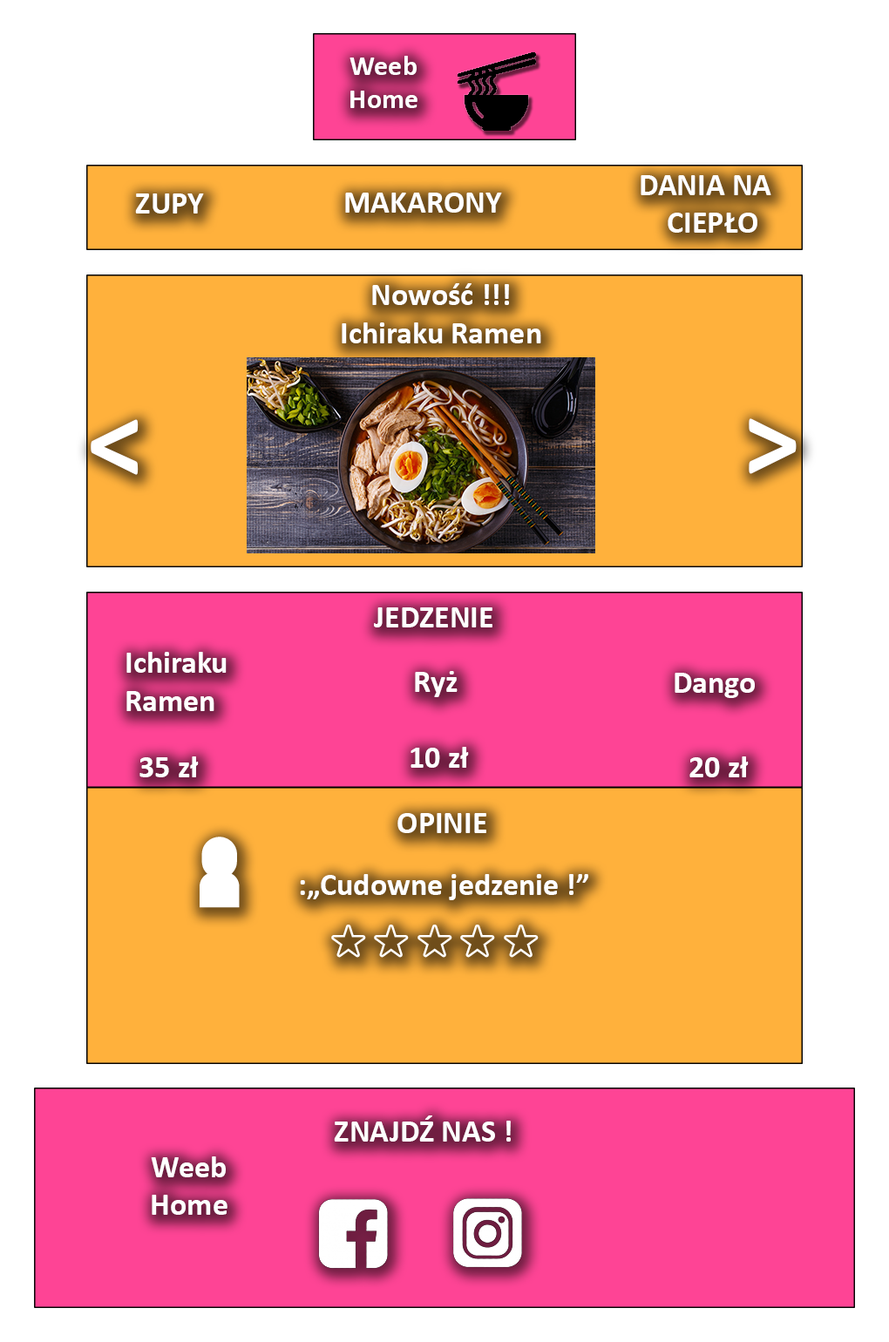
<style>
.page{position:relative;width:889px;height:1342px;background:#ffffff}
.page>*{position:absolute;margin:0}
.t1{font:27.9px "Calibri-Bold";color:#ffffff}
.t2{font:31.4px "Calibri-Bold";color:#ffffff}
.t3{font:113.3px "Calibri-Bold";color:#ffffff}
.t4{font:113.3px "Calibri-Bold"}
</style>
<div class="page">
<p class="t1" style="left:349px;top:56px;width:68px;height:52px;text-align:center">Weeb<br>Home</p>
<p class="t2" style="left:640px;top:175px;width:131px;height:58px">DANIA NA <br>    CIEPŁO</p>
<p class="t2" style="left:135px;top:193px;width:69px;height:20px">ZUPY</p>
<p class="t2" style="left:345px;top:193px;width:157px;height:20px">MAKARONY</p>
<p class="t2" style="left:342px;top:283px;width:199px;height:60px;text-align:center">Nowość !!!<br>Ichiraku Ramen</p>
<p class="t2" style="left:342px;top:283px;width:199px;height:60px;text-align:center">Nowość !!!<br>Ichiraku Ramen</p>
<p class="t2" style="left:342px;top:283px;width:199px;height:60px;text-align:center">Nowość !!!<br>Ichiraku Ramen</p>
<p class="t3" style="left:91px;top:419px;width:48px;height:56px">&lt;</p>
<p class="t3" style="left:91px;top:419px;width:48px;height:56px">&lt;</p>
<p class="t4" style="left:741px;top:418px;width:48px;height:56px">&gt;</p>
<p class="t3" style="left:748px;top:418px;width:48px;height:56px">&gt;</p>
<p class="t2" style="left:374px;top:607px;width:118px;height:20px">JEDZENIE</p>
<p class="t2" style="left:126px;top:651px;width:101px;height:59px">Ichiraku<br>Ramen</p>
<p class="t2" style="left:126px;top:652px;width:101px;height:59px">Ichiraku<br>Ramen</p>
<p class="t2" style="left:415px;top:671px;width:42px;height:26px">Ryż</p>
<p class="t2" style="left:674px;top:673px;width:81px;height:25px">Dango</p>
<p class="t2" style="left:410px;top:747px;width:59px;height:21px">10 zł</p>
<p class="t2" style="left:139px;top:756px;width:60px;height:21px">35 zł</p>
<p class="t2" style="left:689px;top:756px;width:59px;height:21px">20 zł</p>
<p class="t2" style="left:397px;top:813px;width:89px;height:20px">OPINIE</p>
<p class="t2" style="left:397px;top:813px;width:89px;height:20px">OPINIE</p>
<p class="t2" style="left:397px;top:813px;width:89px;height:20px">OPINIE</p>
<p class="t2" style="left:397px;top:813px;width:89px;height:20px">OPINIE</p>
<p class="t2" style="left:300px;top:874px;width:288px;height:26px">:„Cudowne jedzenie !”</p>
<p class="t2" style="left:300px;top:874px;width:288px;height:26px">:„Cudowne jedzenie !”</p>
<p class="t2" style="left:300px;top:874px;width:288px;height:26px">:„Cudowne jedzenie !”</p>
<p class="t2" style="left:300px;top:874px;width:288px;height:26px">:„Cudowne jedzenie !”</p>
<p class="t2" style="left:334px;top:1115px;width:177px;height:26px">ZNAJDŹ NAS !</p>
<p class="t2" style="left:334px;top:1115px;width:177px;height:26px">ZNAJDŹ NAS !</p>
<p class="t2" style="left:151px;top:1156px;width:76px;height:59px;text-align:center">Weeb<br>Home</p>
<p class="t2" style="left:151px;top:1156px;width:76px;height:59px;text-align:center">Weeb<br>Home</p>
</div>
